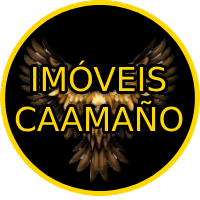
<style>
.page{position:relative;width:200px;height:200px;background:#000000}
.page>*{position:absolute;margin:0}
.t1{font:32.9px "DejaVuSans";color:#ffd700}
</style>
<div class="page">
<p class="t1" style="left:15px;top:60px;width:168px;height:72px;text-align:center">IMÓVEIS<br>CAAMAÑO</p>
</div>
